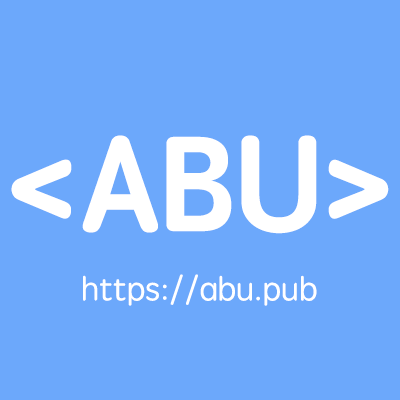
<style>
.page{position:relative;width:400px;height:400px;background:#6ca8fb}
.page>*{position:absolute;margin:0}
.t1{font:135px "STYuanti-SC-Bold";color:#ffffff}
.t2{font:33px "STYuanti-SC-Regular";color:#ffffff}
</style>
<div class="page">
<p class="t1" style="left:11px;top:135px;width:378px;height:99px">&lt;ABU&gt;</p>
<p class="t2" style="left:83px;top:274px;width:234px;height:32px">https://abu.pub</p>
</div>
